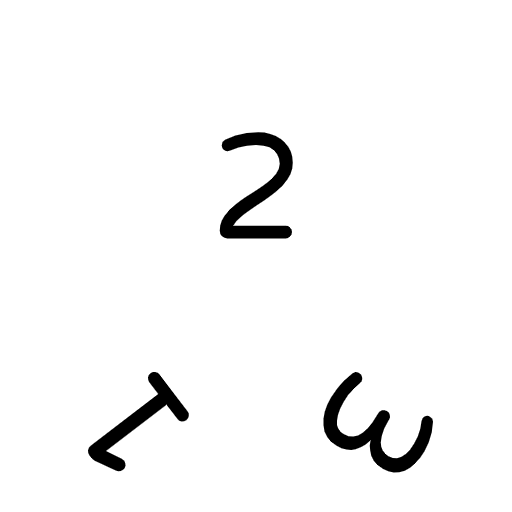
<style>
.page{position:relative;width:512px;height:512px;background:#ffffff}
.page>*{position:absolute;margin:0}
.t1{font:150px "VarelaRound-Regular";color:#000000}
</style>
<div class="page">
<p class="t1" style="left:219px;top:132px;width:74px;height:107px">2</p>
<p class="t1" style="left:87px;top:371px;width:103px;height:102px;rotate:-127deg">1</p>
<p class="t1" style="left:322px;top:371px;width:112px;height:105px;rotate:121deg">3</p>
</div>
